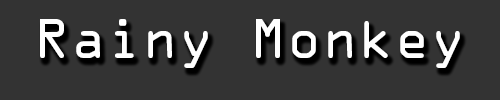
<style>
.page{position:relative;width:500px;height:100px;background:#333333}
.page>*{position:absolute;margin:0}
.t1{font:50px "OCRAStd";color:#ffffff}
</style>
<div class="page">
<p class="t1" style="left:40px;top:19px;width:420px;height:49px">Rainy Monkey</p>
</div>
